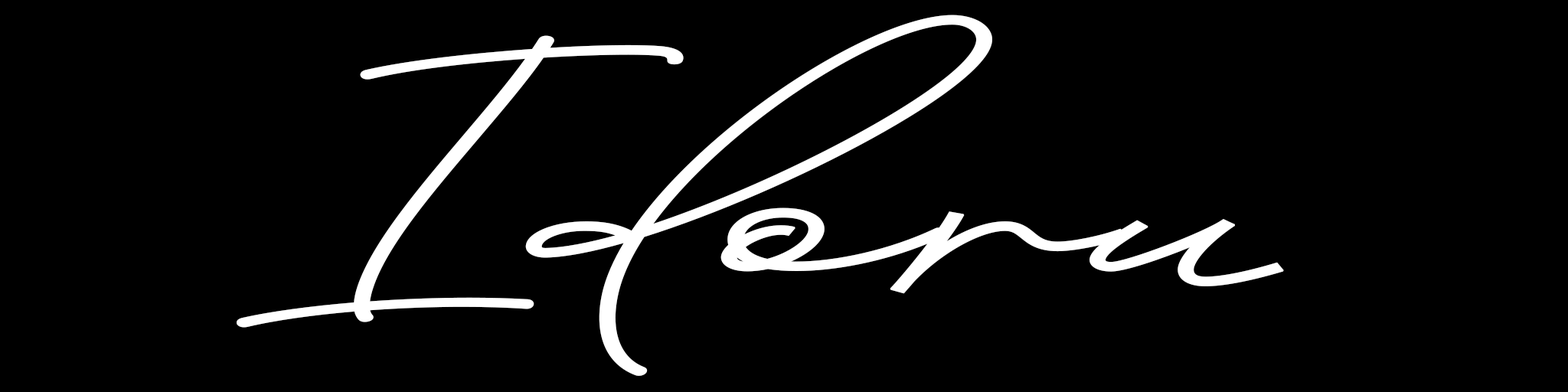
<style>
.page{position:relative;width:1568px;height:392px;background:#000000}
.page>*{position:absolute;margin:0}
.t1{font:501.3px "AbsoluteBeautyScript-Bold";color:#ffffff;font-weight:bold;scale:1.72 1}
</style>
<div class="page">
<p class="t1" style="left:237px;top:15px;width:1047px;height:361px">Idoru</p>
</div>
